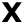
<style>
.page{position:relative;width:24px;height:24px;background:#ffffff}
.page>*{position:absolute;margin:0}
.t1{font:27px "Verdana-Bold";color:#000000}
</style>
<div class="page">
<p class="t1" style="left:1px;top:2px;width:21px;height:20px">X</p>
</div>
